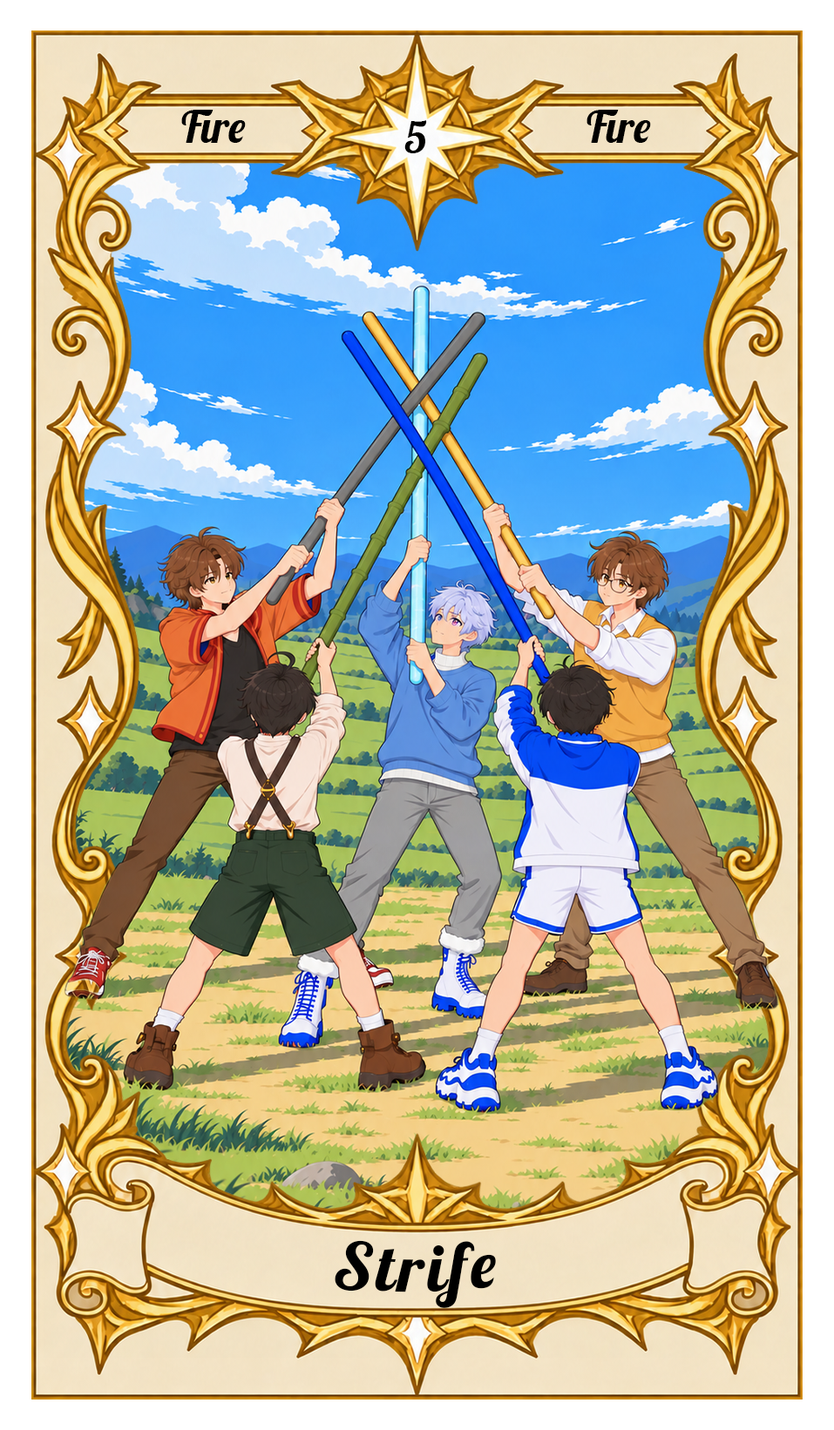
<style>
.page{position:relative;width:834px;height:1430px}
.page>*{position:absolute;margin:0}
.t1{font:43.6px "Lobster-Regular";color:#000000}
.t2{font:65.3px "Lobster-Regular";letter-spacing:0.05em;color:#000000}
</style>
<div class="page">
<p class="t1" style="left:181px;top:110px;width:65px;height:33px">Fire</p>
<p class="t1" style="left:586px;top:110px;width:65px;height:33px">Fire</p>
<p class="t1" style="left:404px;top:120px;width:23px;height:33px">5</p>
<p class="t2" style="left:335px;top:1240px;width:161px;height:68px">Strife</p>
</div>
